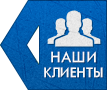
<style>
.page{position:relative;width:107px;height:90px}
.page>*{position:absolute;margin:0}
.t1{font:13px "AFuturaOrtoLtBold";letter-spacing:0.005em;color:#ffffff;text-transform:uppercase}
.t2{font:14px "AFuturaOrtoLtBold";letter-spacing:0.05em;color:#ffffff;text-transform:uppercase}
</style>
<div class="page">
<p class="t1" style="left:44px;top:51px;width:59px;height:27px;text-align:center"><span class="t2">наши<br></span>клиенты</p>
</div>
